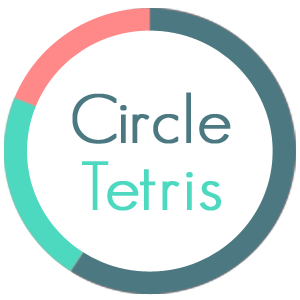
<style>
.page{position:relative;width:300px;height:300px;background:#ffffff}
.page>*{position:absolute;margin:0}
.t1{font:66.8px/66.8px "GeosansLight";letter-spacing:0.018em;color:#4c7981;font-weight:bold}
.t2{font:66.8px/66.8px "GeosansLight";letter-spacing:0.018em;color:#4cd9c0;font-weight:bold}
</style>
<div class="page">
<p class="t1" style="left:72px;top:92px;width:159px;height:119px;text-align:center">Circle<br><span class="t2">Tetris</span></p>
</div>
